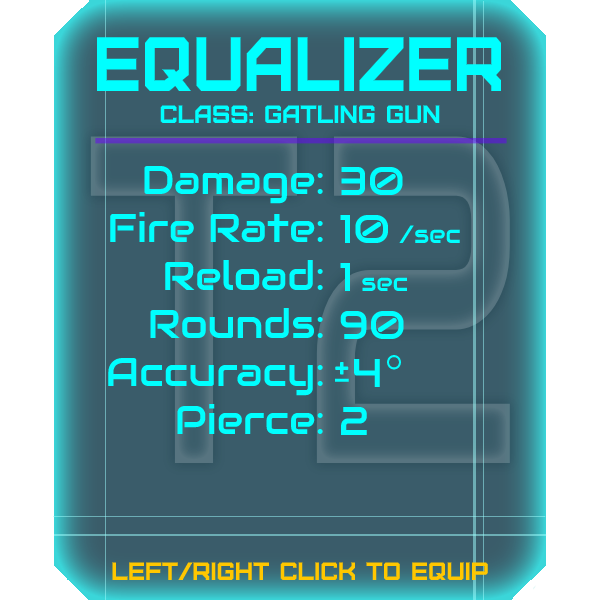
<style>
.page{position:relative;width:600px;height:600px;background:#3a5c6a}
.page>*{position:absolute;margin:0}
.t1{font:76.8px "Furore";color:#00ffff;scale:0.91 1}
.t2{font:25px "Furore";color:#00ffff}
.t3{font:40px "Audiowide-Regular";color:#00ffff}
.t4{font:25px "Audiowide-Regular";color:#00ffff}
.t5{font:25px "Furore";color:#ffc700}
</style>
<div class="page">
<p class="t1" style="left:97px;top:37px;width:404px;height:54px">Equalizer</p>
<p class="t2" style="left:160px;top:105px;width:280px;height:18px">Class: gatling gun</p>
<p class="t3" style="left:108px;top:165px;width:215px;height:269px;text-align:right">Damage:<br>Fire Rate:<br>Reload:<br>Rounds:<br>Accuracy:<br>Pierce:</p>
<p class="t3" style="left:340px;top:166px;width:120px;height:269px">30<br>10 <span class="t4">/sec<br></span>1 <span class="t4">sec<br></span>90<br> 4<br>2</p>
<p class="t5" style="left:112px;top:562px;width:376px;height:18px">left/right click to equip</p>
</div>
